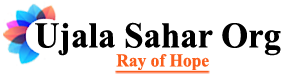
<style>
.page{position:relative;width:289px;height:79px;background:#ffffff}
.page>*{position:absolute;margin:0}
.t1{font:36px "TimesNewRomanPS-BoldMT";color:#000000;scale:0.97 1}
</style>
<div class="page">
<p class="t1" style="left:35px;top:22px;width:246px;height:34px">Ujala Sahar Org</p>
</div>
